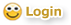
<style>
.page{position:relative;width:71px;height:25px;background:#ffffff}
.page>*{position:absolute;margin:0}
.t1{font:12.5px "Verdana-Bold";color:#c29725;scale:0.95 1}
</style>
<div class="page">
<p class="t1" style="left:26px;top:6px;width:35px;height:13px">Login</p>
</div>
